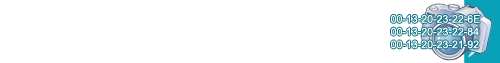
<style>
.page{position:relative;width:500px;height:63px;background:#ffffff}
.page>*{position:absolute;margin:0}
.t1{font:10.6px "ArialMT";color:#ffffff}
</style>
<div class="page">
<p class="t1" style="left:391px;top:15px;width:89px;height:34px">00-13-20-23-22-6E<br>00-13-20-23-22-84<br>00-13-20-23-21-92</p>
</div>
